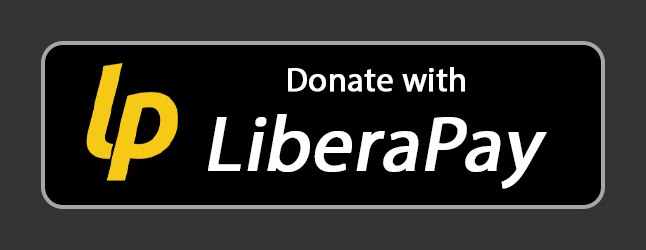
<style>
.page{position:relative;width:646px;height:250px;background:#000000}
.page>*{position:absolute;margin:0}
.t1{font:33.6px "MyriadPro-Regular";color:#ffffff;font-weight:bold}
.t2{font:78.7px "MyriadPro-Regular";color:#ffffff;font-weight:bold;font-style:italic}
</style>
<div class="page">
<p class="t1" style="left:288px;top:67px;width:177px;height:25px">Donate with</p>
<p class="t2" style="left:208px;top:114px;width:339px;height:75px">LiberaPay</p>
</div>
